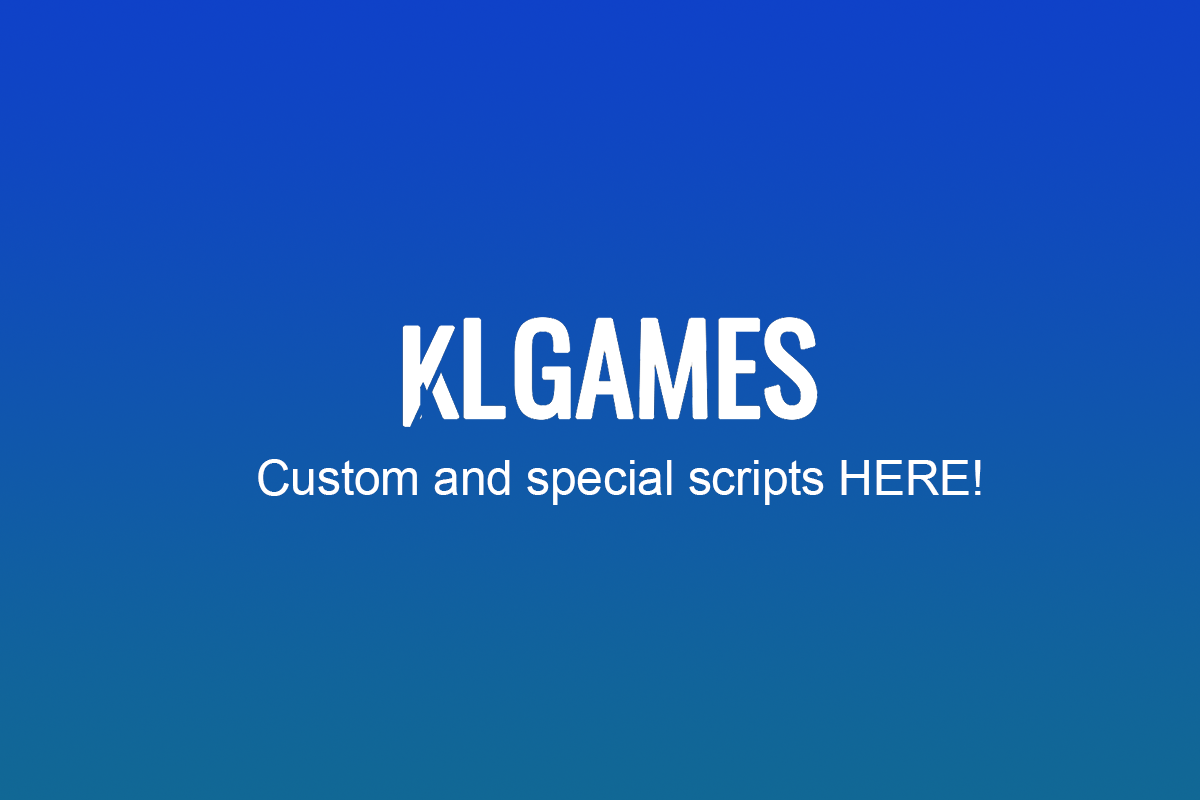
<style>
.page{position:relative;width:1200px;height:800px}
.page>*{position:absolute;margin:0}
.t1{font:47.6px "ArialMT";color:#ffffff}
</style>
<div class="page">
<p class="t1" style="left:258px;top:459px;width:723px;height:46px">Custom and special scripts HERE!</p>
</div>
